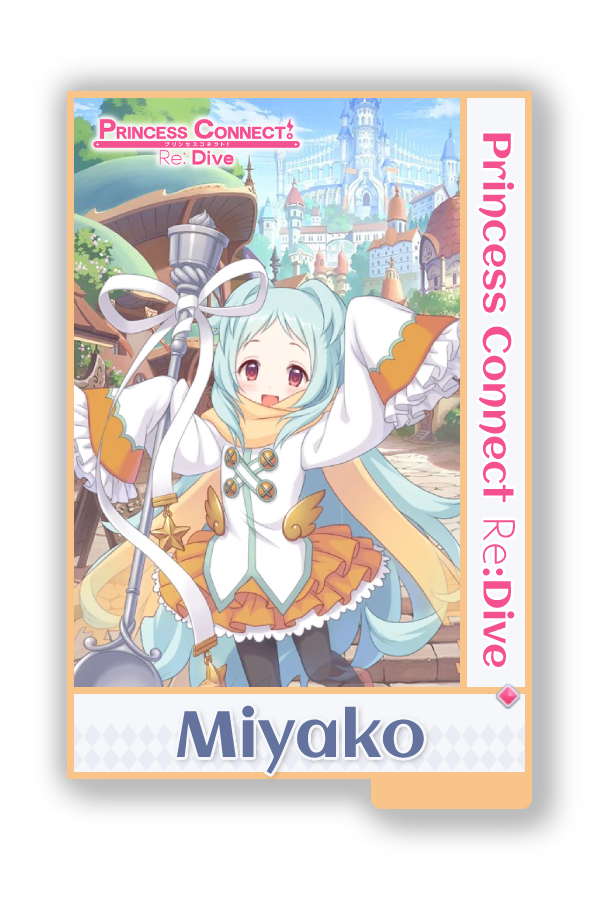
<style>
.page{position:relative;width:600px;height:900px;background:#ffffff}
.page>*{position:absolute;margin:0}
.t1{font:39px "Aclonica-Regular";color:#f55191}
.t2{font:39px "AaarghNormal";color:#f55191}
.t3{font:65px "Aclonica-Regular";color:#64739d}
</style>
<div class="page">
<p class="t1" style="left:478px;top:133px;width:38px;height:534px;rotate:90deg">Princess Connect <span class="t2">Re</span>:Dive</p>
<p class="t3" style="left:176px;top:705px;width:248px;height:69px">Miyako</p>
</div>
